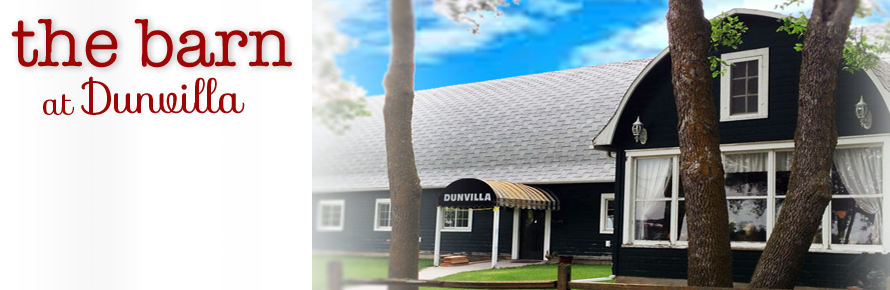
<style>
.page{position:relative;width:890px;height:290px}
.page>*{position:absolute;margin:0}
.t1{font:69.2px "AmericanTypewriter";color:#9d0404}
.t2{font:43.7px "Sofia-Regular";color:#9d0404}
.t3{font:34.5px "Sofia-Regular";color:#9d0404}
</style>
<div class="page">
<p class="t1" style="left:11px;top:19px;width:281px;height:49px">the barn</p>
<p class="t2" style="left:81px;top:76px;width:164px;height:39px">Dunvilla</p>
<p class="t3" style="left:43px;top:94px;width:31px;height:21px">at</p>
</div>
